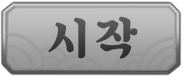
<style>
.page{position:relative;width:183px;height:76px}
.page>*{position:absolute;margin:0}
.t1{font:46.1px "SDKukdetopokki-bBd";letter-spacing:0.12em;color:#474747}
</style>
<div class="page">
<p class="t1" style="left:48px;top:16px;width:90px;height:43px">시작</p>
</div>
